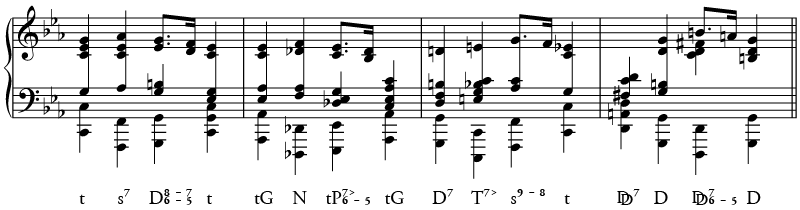
<style>
.page{position:relative;width:800px;height:210px;background:#ffffff}
.page>*{position:absolute;margin:0}
.t1{font:18.7px "Analysia";color:#000000}
</style>
<div class="page">
<p class="t1" style="left:79px;top:189px;width:682px;height:16px">t       sÏª    DØÐª ˜™ ª×Ïª   t         tG    N    tPØÏªê ™ ª×ª   tG      DÏª    TÏªêª   sÑª ˜ª Ðª    t          æçÏª   D     æçØÏª ™ª ×ª  D</p>
</div>
